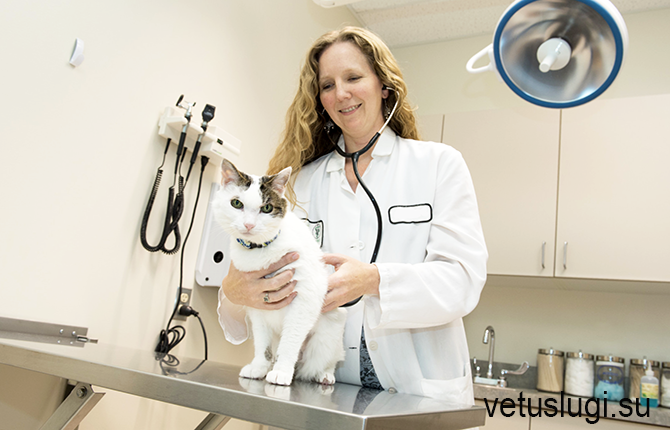
<style>
.page{position:relative;width:670px;height:430px}
.page>*{position:absolute;margin:0}
.t1{font:37.3px "ArialNarrow";letter-spacing:0.002em;color:#060606;scale:1.04 1}
</style>
<div class="page">
<p class="t1" style="left:483px;top:391px;width:167px;height:33px">vetuslugi.su</p>
</div>
